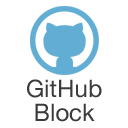
<style>
.page{position:relative;width:128px;height:128px;background:#ffffff}
.page>*{position:absolute;margin:0}
.t1{font:24px/24px "HelveticaNeue";color:#3b3b3b}
</style>
<div class="page">
<p class="t1" style="left:27px;top:79px;width:75px;height:43px;text-align:center">GitHub<br>Block</p>
</div>
